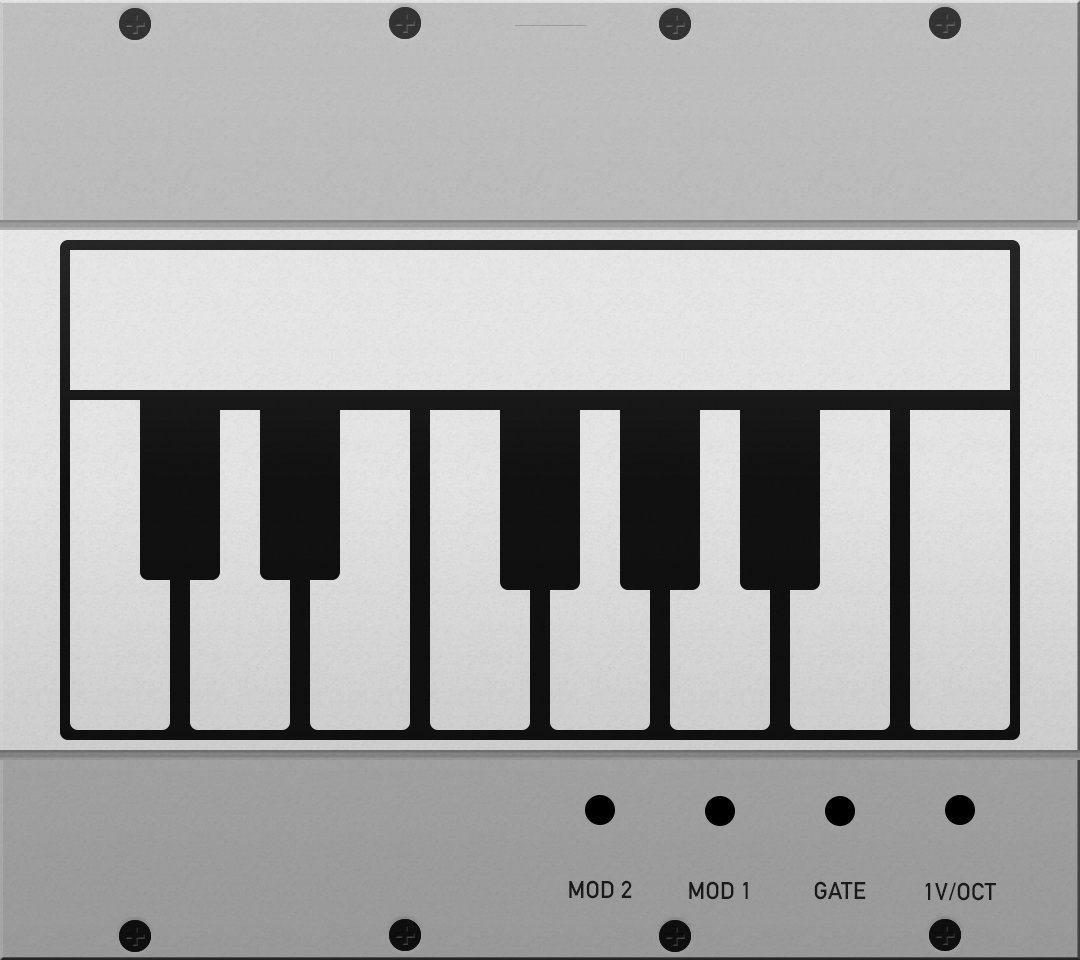
<style>
.page{position:relative;width:1080px;height:960px}
.page>*{position:absolute;margin:0}
.t1{font:24px "DINAlternate-Bold";color:#1f1f1f;font-variant:small-caps}
</style>
<div class="page">
<p class="t1" style="left:569px;top:880px;width:63px;height:19px">MOD 2</p>
<p class="t1" style="left:689px;top:881px;width:59px;height:19px">MOD 1</p>
<p class="t1" style="left:814px;top:881px;width:52px;height:19px">GATE</p>
<p class="t1" style="left:925px;top:882px;width:71px;height:19px">1V/OCT</p>
</div>
